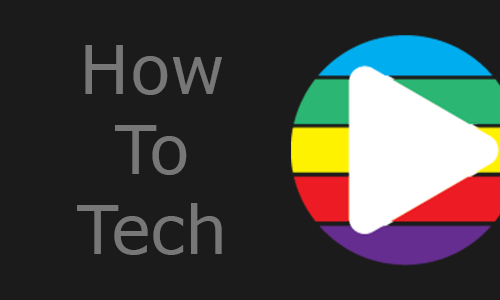
<style>
.page{position:relative;width:500px;height:300px;background:#1b1b1b}
.page>*{position:absolute;margin:0}
.t1{font:66.7px "Verdana";color:#777777}
</style>
<div class="page">
<p class="t1" style="left:77px;top:45px;width:145px;height:210px;text-align:center">How<br>To<br>Tech</p>
</div>
